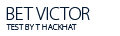
<style>
.page{position:relative;width:120px;height:36px;background:#ffffff}
.page>*{position:absolute;margin:0}
.t1{font:18.5px "MyriadPro-Light";color:#051932;text-transform:uppercase}
.t2{font:8.9px "MyriadPro-Light";color:#051932;text-transform:uppercase}
</style>
<div class="page">
<p class="t1" style="left:6px;top:7px;width:84px;height:13px">bet victor</p>
<p class="t2" style="left:6px;top:24px;width:71px;height:6px">test by t hackhat</p>
</div>
